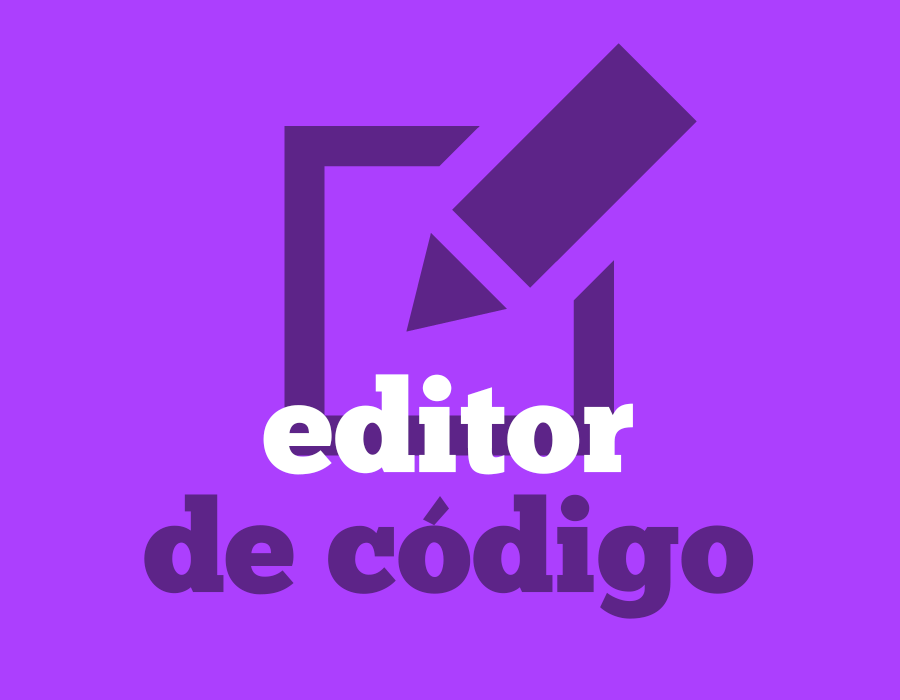
<style>
.page{position:relative;width:900px;height:700px;background:#ac3ffe}
.page>*{position:absolute;margin:0}
.t1{font:130px/120px "ChunkFive-Roman";color:#5d2488}
.t2{font:130px/120px "ChunkFive-Roman";color:#ffffff}
</style>
<div class="page">
<p class="t1" style="left:144px;top:374px;width:610px;height:245px;text-align:center"><span class="t2">editor<br></span>de código</p>
</div>
